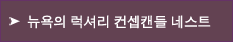
<style>
.page{position:relative;width:233px;height:42px;background:#634252}
.page>*{position:absolute;margin:0}
.t1{font:14px "Dotum";letter-spacing:-0.075em;color:#ffffff;font-weight:bold}
</style>
<div class="page">
<p class="t1" style="left:27px;top:15px;width:184px;height:14px">뉴욕의 럭셔리 컨셉캔들 네스트</p>
</div>
